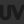
<style>
.page{position:relative;width:24px;height:24px;background:#333333}
.page>*{position:absolute;margin:0}
.t1{font:21px "LucidaConsole";color:#1b1b1b}
</style>
<div class="page">
<p class="t1" style="left:0px;top:5px;width:24px;height:15px">UV</p>
</div>
